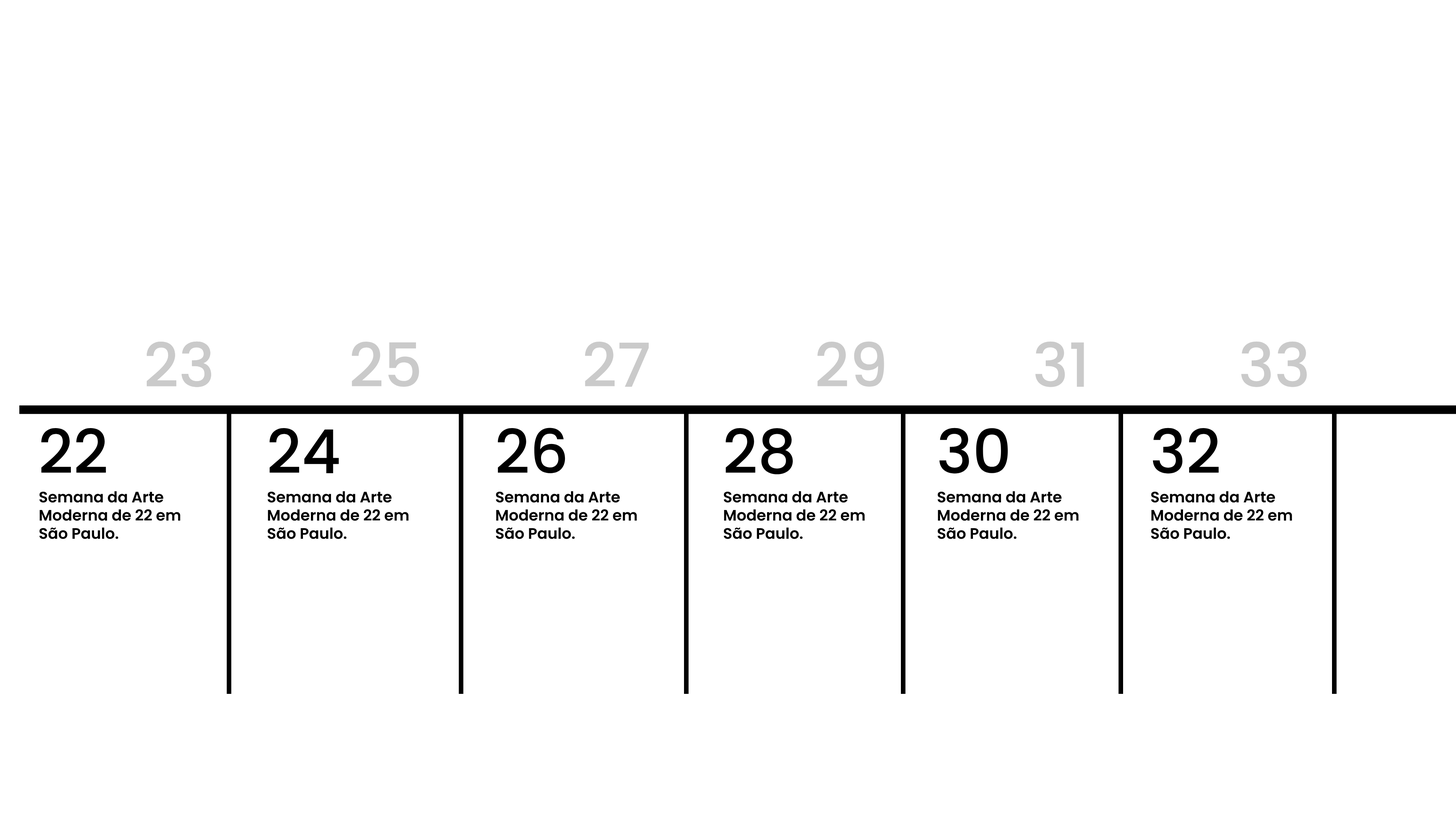
<style>
.page{position:relative;width:1456px;height:819px;background:#ffffff}
.page>*{position:absolute;margin:0}
.t1{font:60.7px "Poppins-Medium";color:#cacaca}
.t2{font:60.7px "Poppins-Medium";color:#000000}
.t3{font:15.2px "Poppins-SemiBold";color:#000000}
</style>
<div class="page">
<p class="t1" style="left:147px;top:341px;width:64px;height:46px">23</p>
<p class="t1" style="left:147px;top:341px;width:64px;height:46px">23</p>
<p class="t1" style="left:352px;top:341px;width:67px;height:46px">25</p>
<p class="t1" style="left:585px;top:341px;width:64px;height:46px">27</p>
<p class="t1" style="left:817px;top:341px;width:67px;height:46px">29</p>
<p class="t1" style="left:1035px;top:341px;width:49px;height:46px">31</p>
<p class="t1" style="left:1241px;top:341px;width:66px;height:46px">33</p>
<p class="t2" style="left:41px;top:428px;width:65px;height:45px">22</p>
<p class="t2" style="left:270px;top:428px;width:69px;height:45px">24</p>
<p class="t2" style="left:498px;top:428px;width:67px;height:45px">26</p>
<p class="t2" style="left:726px;top:428px;width:67px;height:46px">28</p>
<p class="t2" style="left:939px;top:428px;width:69px;height:46px">30</p>
<p class="t2" style="left:1153px;top:428px;width:66px;height:46px">32</p>
<p class="t3" style="left:39px;top:491px;width:141px;height:48px">Semana da Arte <br>Moderna de 22 em <br>São Paulo.</p>
<p class="t3" style="left:268px;top:491px;width:141px;height:48px">Semana da Arte <br>Moderna de 22 em <br>São Paulo.</p>
<p class="t3" style="left:496px;top:491px;width:141px;height:48px">Semana da Arte <br>Moderna de 22 em <br>São Paulo.</p>
<p class="t3" style="left:724px;top:491px;width:141px;height:48px">Semana da Arte <br>Moderna de 22 em <br>São Paulo.</p>
<p class="t3" style="left:938px;top:491px;width:141px;height:48px">Semana da Arte <br>Moderna de 22 em <br>São Paulo.</p>
<p class="t3" style="left:1151px;top:491px;width:141px;height:48px">Semana da Arte <br>Moderna de 22 em <br>São Paulo.</p>
</div>
